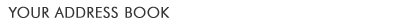
<style>
.page{position:relative;width:400px;height:24px;background:#ffffff}
.page>*{position:absolute;margin:0}
.t1{font:14.7px "FuturaBT-Light";letter-spacing:0.025em;color:#363636;text-transform:uppercase;font-weight:bold}
</style>
<div class="page">
<p class="t1" style="left:8px;top:6px;width:162px;height:12px">YOUR ADDRESS BOOK</p>
</div>
